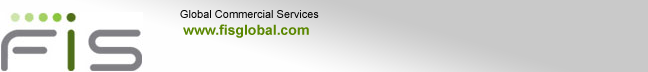
<style>
.page{position:relative;width:648px;height:72px;background:#c9c9c9}
.page>*{position:absolute;margin:0}
.t1{font:11px "ArialMT";color:#050505}
.t2{font:14px "Arial-BoldMT";color:#5a8700}
</style>
<div class="page">
<p class="t1" style="left:180px;top:10px;width:139px;height:28px">Global Commercial Services<br> <span class="t2">www.fisglobal.com</span></p>
</div>
